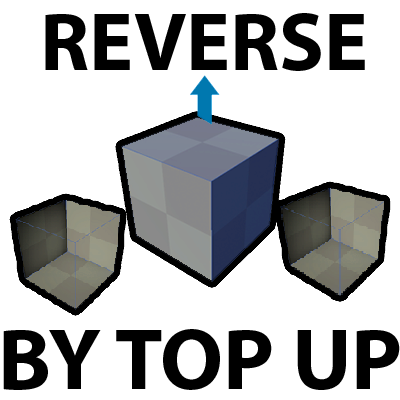
<style>
.page{position:relative;width:400px;height:400px;background:#ffffff}
.page>*{position:absolute;margin:0}
.t1{font:82.4px "MyriadPro-Bold";color:#000000}
.t2{font:87.6px "MyriadPro-Bold";color:#000000}
</style>
<div class="page">
<p class="t1" style="left:45px;top:13px;width:320px;height:58px">REVERSE</p>
<p class="t2" style="left:3px;top:329px;width:397px;height:61px">BY TOP UP</p>
</div>
